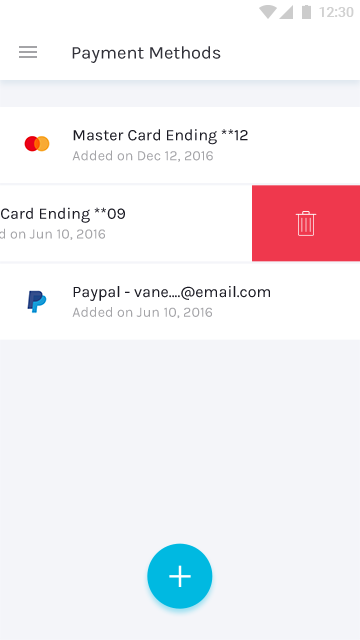
<style>
.page{position:relative;width:360px;height:640px;background:#f4f5f9}
.page>*{position:absolute;margin:0}
.t1{font:18px "Karla-Regular";color:#1b1b24}
.t2{font:16px "Karla-Regular";color:#1b1b24}
.t3{font:14.1px "Karla-Regular";color:#a4a4a7}
</style>
<div class="page">
<p class="t1" style="left:72px;top:46px;width:149px;height:17px;opacity:0.9">Payment Methods</p>
<p class="t2" style="left:73px;top:129px;width:175px;height:16px">Master Card Ending **12</p>
<p class="t3" style="left:72px;top:150px;width:141px;height:12px">Added on Dec 12, 2016</p>
<p class="t2" style="left:73px;top:286px;width:197px;height:15px">Paypal - vane....@email.com</p>
<p class="t3" style="left:72px;top:307px;width:140px;height:12px">Added on Jun 10, 2016</p>
</div>
